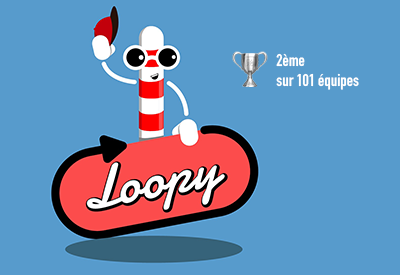
<style>
.page{position:relative;width:400px;height:275px;background:#579bcc}
.page>*{position:absolute;margin:0}
.t1{font:16.7px "DINCondensed-Bold";color:#ffffff}
</style>
<div class="page">
<p class="t1" style="left:276px;top:53px;width:83px;height:37px">2ème<br>sur 101 équipes</p>
</div>
